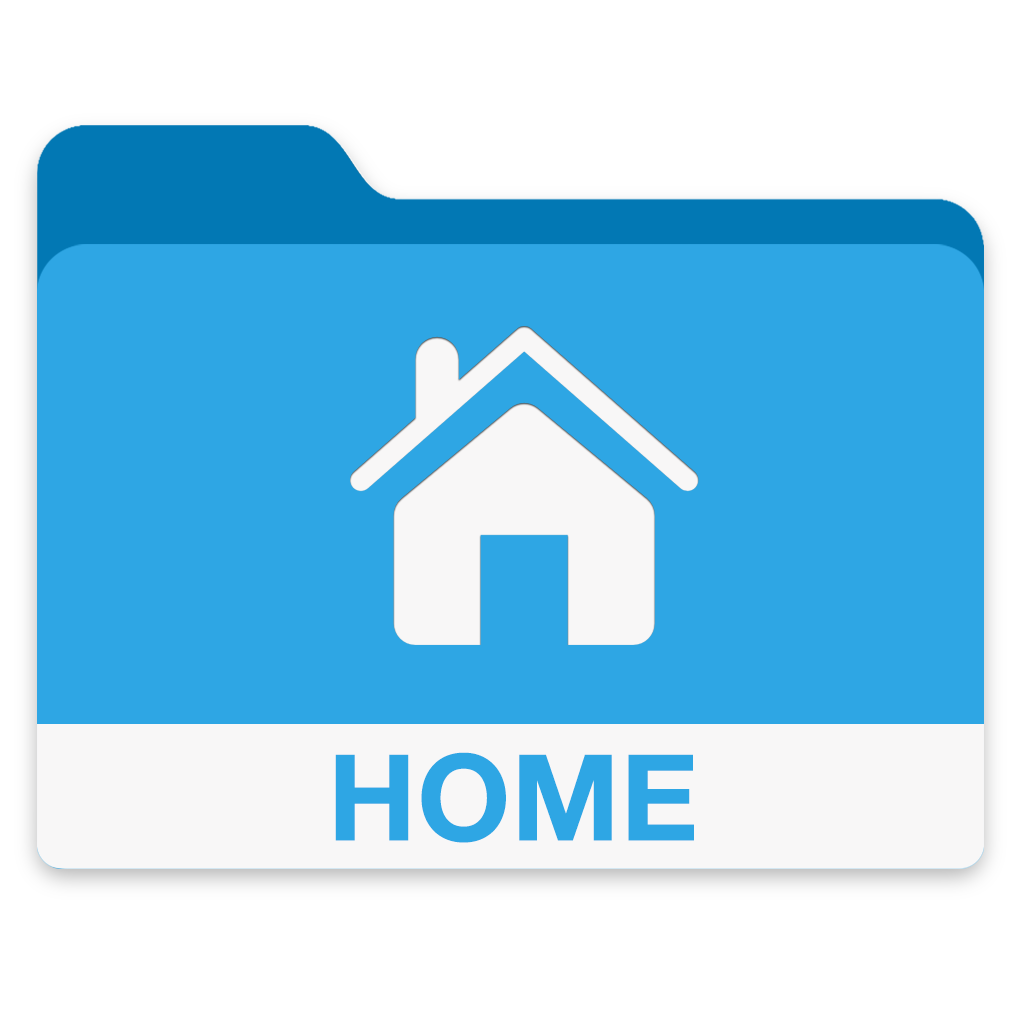
<style>
.page{position:relative;width:1024px;height:1024px;background:#2ea6e4}
.page>*{position:absolute;margin:0}
.t1{font:120px "HelveticaNeue-Bold";letter-spacing:0.005em;color:#2ea6e4}
</style>
<div class="page">
<p class="t1" style="left:335px;top:752px;width:359px;height:91px">HOME</p>
</div>
